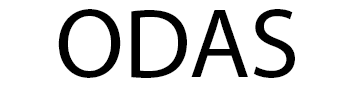
<style>
.page{position:relative;width:354px;height:85px;background:#ffffff}
.page>*{position:absolute;margin:0}
.t1{font:100px "MyriadPro-Regular";color:#000000;text-transform:uppercase}
</style>
<div class="page">
<p class="t1" style="left:58px;top:9px;width:237px;height:69px">odas</p>
</div>
